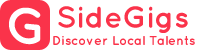
<style>
.page{position:relative;width:200px;height:50px;background:#ffffff}
.page>*{position:absolute;margin:0}
.t1{font:30px "Quicksand-Bold";color:#fa334a}
.t2{font:50.5px "Quicksand-Bold";color:#ffffff}
.t3{font:13px "Quicksand-Bold";color:#fa334a}
</style>
<div class="page">
<p class="t1" style="left:58px;top:6px;width:130px;height:27px">SideGigs</p>
<p class="t2" style="left:9px;top:7px;width:32px;height:38px;rotate:5deg">G</p>
<p class="t3" style="left:53px;top:36px;width:142px;height:9px">Discover Local Talents</p>
</div>
